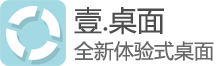
<style>
.page{position:relative;width:219px;height:66px;background:#ffffff}
.page>*{position:absolute;margin:0}
.t1{font:28px "MicrosoftYaHei";color:#4d4d4d}
.t2{font:20px "MicrosoftYaHei";color:#696969}
</style>
<div class="page">
<p class="t1" style="left:74px;top:7px;width:90px;height:28px">壹.桌面</p>
<p class="t2" style="left:74px;top:41px;width:140px;height:20px">全新体验式桌面</p>
</div>
